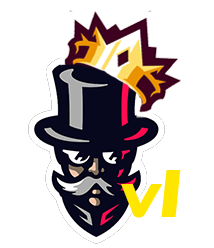
<style>
.page{position:relative;width:214px;height:248px;background:#ffffff}
.page>*{position:absolute;margin:0}
.t1{font:69px "!PEPSI!";color:#ffe600;font-variant:small-caps}
</style>
<div class="page">
<p class="t1" style="left:121px;top:170px;width:60px;height:48px">v1</p>
</div>
